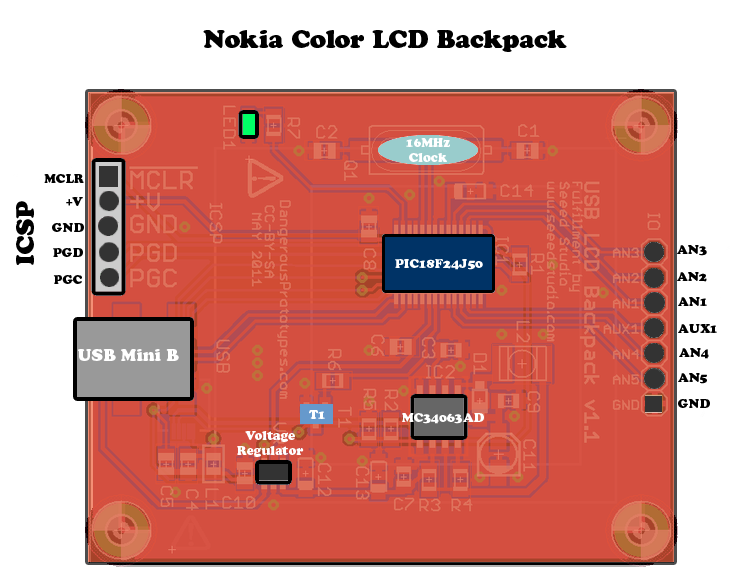
<style>
.page{position:relative;width:735px;height:567px;background:#ffffff}
.page>*{position:absolute;margin:0}
.t1{font:25px "CooperBlackStd";color:#000000}
.t2{font:12.5px "CooperBlackStd";color:#ffffff}
.t3{font:12.5px "CooperBlackStd";color:#000000}
.t4{font:16.7px "CooperBlackStd";color:#ffffff}
</style>
<div class="page">
<p class="t1" style="left:203px;top:30px;width:364px;height:22px">Nokia Color LCD Backpack</p>
<p class="t2" style="left:406px;top:138px;width:44px;height:24px;text-align:center">16MHz<br>Clock</p>
<p class="t3" style="left:44px;top:174px;width:40px;height:9px">MCLR</p>
<p class="t3" style="left:66px;top:197px;width:17px;height:9px">+V</p>
<p class="t1" style="left:16px;top:201px;width:18px;height:64px;rotate:-90deg">ICSP</p>
<p class="t3" style="left:52px;top:223px;width:32px;height:9px">GND</p>
<p class="t3" style="left:677px;top:245px;width:30px;height:11px">AN3</p>
<p class="t3" style="left:53px;top:248px;width:30px;height:9px">PGD</p>
<p class="t2" style="left:395px;top:259px;width:88px;height:11px">PIC18F24J50</p>
<p class="t3" style="left:53px;top:275px;width:29px;height:9px">PGC</p>
<p class="t3" style="left:677px;top:272px;width:30px;height:10px">AN2</p>
<p class="t3" style="left:678px;top:297px;width:29px;height:9px">AN1</p>
<p class="t3" style="left:678px;top:324px;width:39px;height:9px">AUX1</p>
<p class="t4" style="left:78px;top:349px;width:101px;height:12px">USB Mini B</p>
<p class="t3" style="left:679px;top:348px;width:30px;height:11px">AN4</p>
<p class="t3" style="left:678px;top:373px;width:29px;height:11px">AN5</p>
<p class="t3" style="left:678px;top:399px;width:32px;height:9px">GND</p>
<p class="t2" style="left:309px;top:410px;width:16px;height:9px">T1</p>
<p class="t2" style="left:402px;top:413px;width:82px;height:11px">MC34063AD</p>
<p class="t2" style="left:237px;top:431px;width:67px;height:26px;text-align:center">Voltage<br>Regulator</p>
</div>
